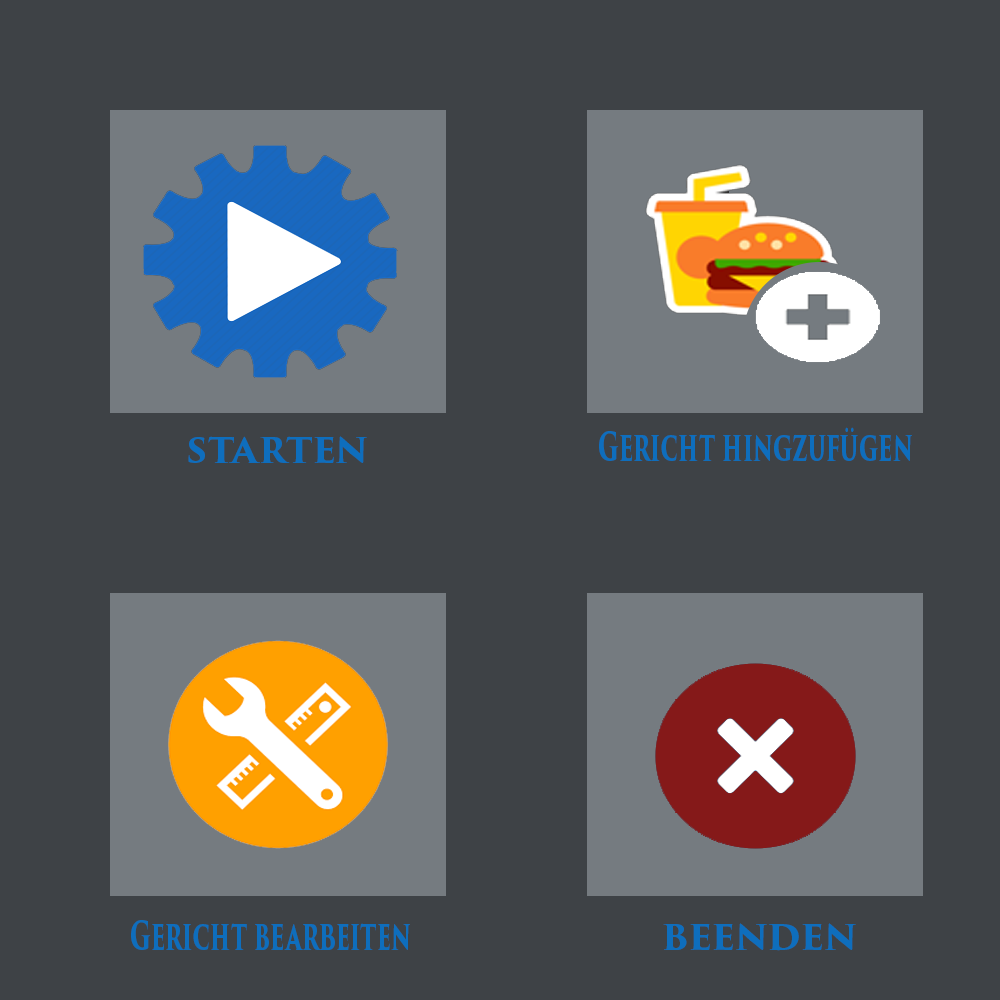
<style>
.page{position:relative;width:1000px;height:1000px;background:#3e4246}
.page>*{position:absolute;margin:0}
.t1{font:34px "TrajanPro3-Bold";color:#0e6ebd;scale:1.04 1}
.t2{font:39.3px "TrajanPro3-Bold";color:#0e6ebd;scale:0.6 1}
</style>
<div class="page">
<p class="t1" style="left:188px;top:436px;width:179px;height:27px">STARTEN</p>
<p class="t2" style="left:599px;top:427px;width:313px;height:34px">Gericht hingzufügen</p>
<p class="t2" style="left:131px;top:920px;width:279px;height:30px">Gericht bearbeiten</p>
<p class="t1" style="left:663px;top:923px;width:193px;height:28px">BEENDEN</p>
</div>
